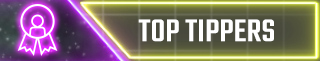
<style>
.page{position:relative;width:320px;height:61px}
.page>*{position:absolute;margin:0}
.t1{font:34.6px "Teko-Medium";color:#ffffff;text-transform:uppercase}
</style>
<div class="page">
<p class="t1" style="left:138px;top:19px;width:136px;height:23px">Top Tippers</p>
</div>
